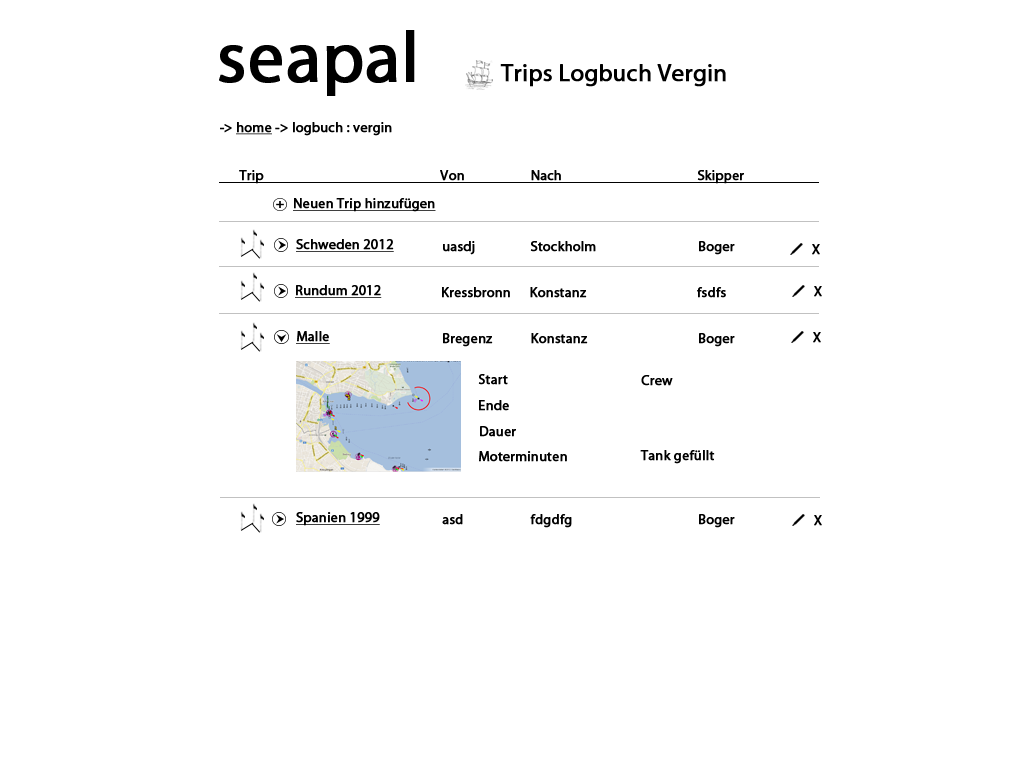
<style>
.page{position:relative;width:1024px;height:768px;background:#ffffff}
.page>*{position:absolute;margin:0}
.t1{font:72px "MyriadPro-Regular";color:#000000;font-weight:bold}
.t2{font:24px "MyriadPro-Regular";color:#000000;font-weight:bold}
.t3{font:14px "MyriadPro-Regular";color:#000000;font-weight:bold}
.t4{font:14px "MyriadPro-Regular";color:#000000;font-weight:bold;text-decoration:underline}
</style>
<div class="page">
<p class="t1" style="left:219px;top:30px;width:196px;height:66px">seapal</p>
<p class="t2" style="left:500px;top:64px;width:226px;height:23px">Trips Logbuch Vergin</p>
<p class="t3" style="left:220px;top:122px;width:172px;height:14px">-&gt; <span class="t4">home</span> -&gt; logbuch : vergin</p>
<p class="t3" style="left:239px;top:170px;width:25px;height:14px">Trip</p>
<p class="t3" style="left:440px;top:170px;width:24px;height:11px">Von</p>
<p class="t3" style="left:531px;top:170px;width:30px;height:11px">Nach</p>
<p class="t3" style="left:697px;top:170px;width:47px;height:14px">Skipper</p>
<p class="t4" style="left:293px;top:198px;width:143px;height:14px">Neuen Trip hinzufügen</p>
<p class="t4" style="left:296px;top:239px;width:98px;height:13px">Schweden 2012</p>
<p class="t3" style="left:443px;top:241px;width:32px;height:14px">uasdj</p>
<p class="t3" style="left:530px;top:241px;width:66px;height:11px">Stockholm</p>
<p class="t3" style="left:699px;top:241px;width:36px;height:14px">Boger</p>
<p class="t3" style="left:812px;top:244px;width:8px;height:11px">X</p>
<p class="t4" style="left:295px;top:285px;width:87px;height:13px">Rundum 2012</p>
<p class="t3" style="left:442px;top:287px;width:68px;height:11px">Kressbronn</p>
<p class="t3" style="left:530px;top:287px;width:57px;height:11px">Konstanz</p>
<p class="t3" style="left:697px;top:287px;width:29px;height:11px">fsdfs</p>
<p class="t3" style="left:814px;top:286px;width:8px;height:11px">X</p>
<p class="t4" style="left:296px;top:331px;width:34px;height:13px">Malle</p>
<p class="t3" style="left:443px;top:333px;width:50px;height:14px">Bregenz</p>
<p class="t3" style="left:531px;top:333px;width:57px;height:11px">Konstanz</p>
<p class="t3" style="left:699px;top:333px;width:36px;height:14px">Boger</p>
<p class="t3" style="left:813px;top:332px;width:8px;height:11px">X</p>
<p class="t3" style="left:478px;top:374px;width:30px;height:11px">Start</p>
<p class="t3" style="left:641px;top:375px;width:32px;height:11px">Crew</p>
<p class="t3" style="left:479px;top:400px;width:30px;height:11px">Ende</p>
<p class="t3" style="left:480px;top:426px;width:36px;height:11px">Dauer</p>
<p class="t3" style="left:479px;top:451px;width:88px;height:11px">Moterminuten</p>
<p class="t3" style="left:640px;top:450px;width:75px;height:14px">Tank gefüllt</p>
<p class="t4" style="left:296px;top:512px;width:84px;height:14px">Spanien 1999</p>
<p class="t3" style="left:442px;top:514px;width:21px;height:11px">asd</p>
<p class="t3" style="left:530px;top:514px;width:42px;height:14px">fdgdfg</p>
<p class="t3" style="left:699px;top:514px;width:36px;height:14px">Boger</p>
<p class="t3" style="left:814px;top:515px;width:8px;height:11px">X</p>
</div>
